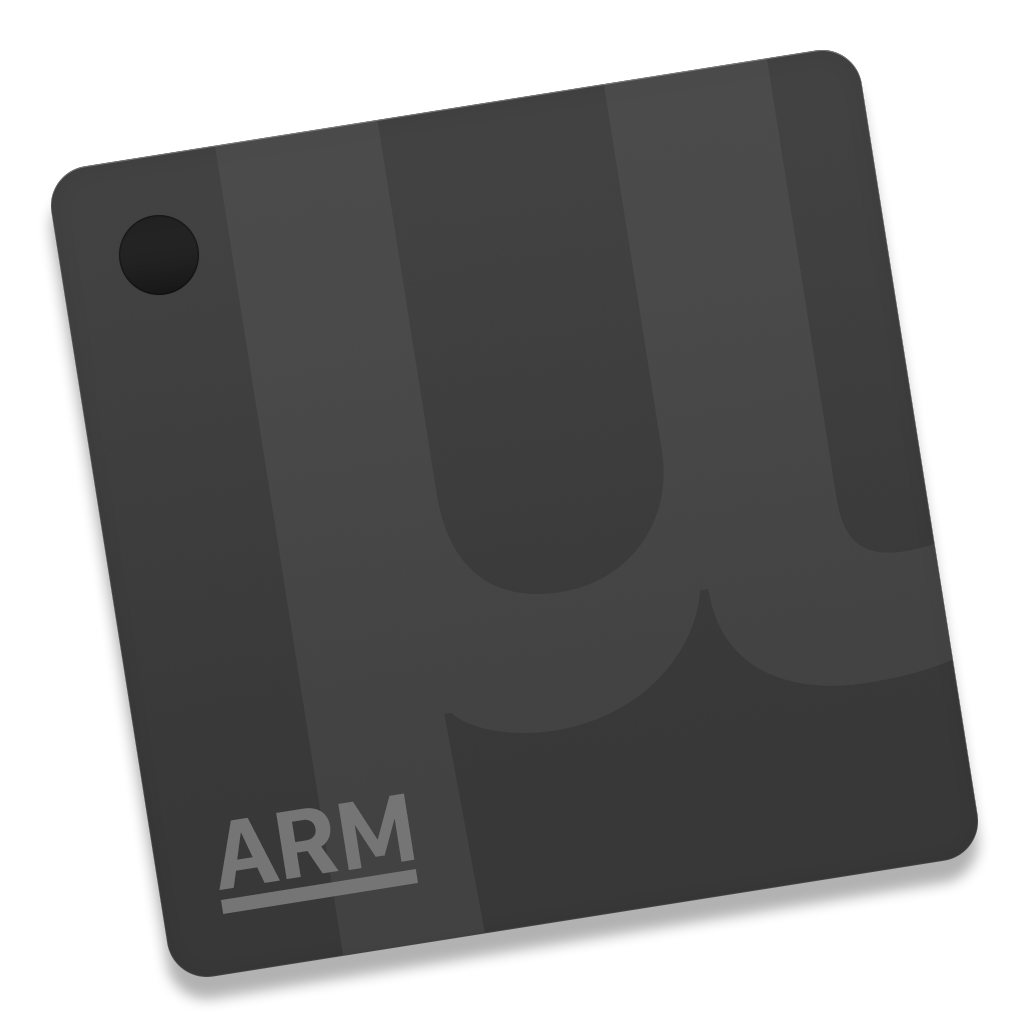
<style>
.page{position:relative;width:1024px;height:1024px;background:#ffffff}
.page>*{position:absolute;margin:0}
.t1{font:100px "SanFranciscoDisplay-Bold";letter-spacing:0.005em;color:#757575}
</style>
<div class="page">
<p class="t1" style="left:219px;top:793px;width:196px;height:97px;rotate:-9deg">ARM</p>
</div>
